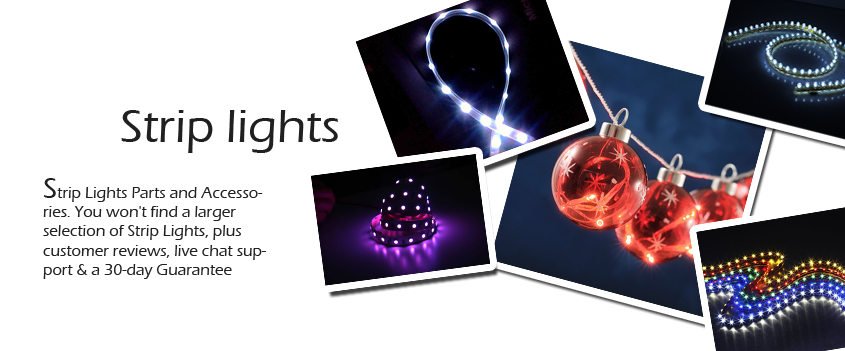
<style>
.page{position:relative;width:845px;height:351px;background:#ffffff}
.page>*{position:absolute;margin:0}
.t1{font:48px "ErasITC-Medium";color:#212020}
.t2{font:16px "ErasITC-Medium";color:#212020}
.t3{font:30px "ErasITC-Medium";color:#212020}
</style>
<div class="page">
<p class="t1" style="left:121px;top:110px;width:217px;height:43px">Strip lights</p>
<p class="t2" style="left:43px;top:178px;width:223px;height:101px"><span class="t3">S</span>trip Lights Parts and Accessories. You won't find a larger selection of Strip Lights, plus customer reviews, live chat support &amp; a 30-day Guarantee</p>
</div>
